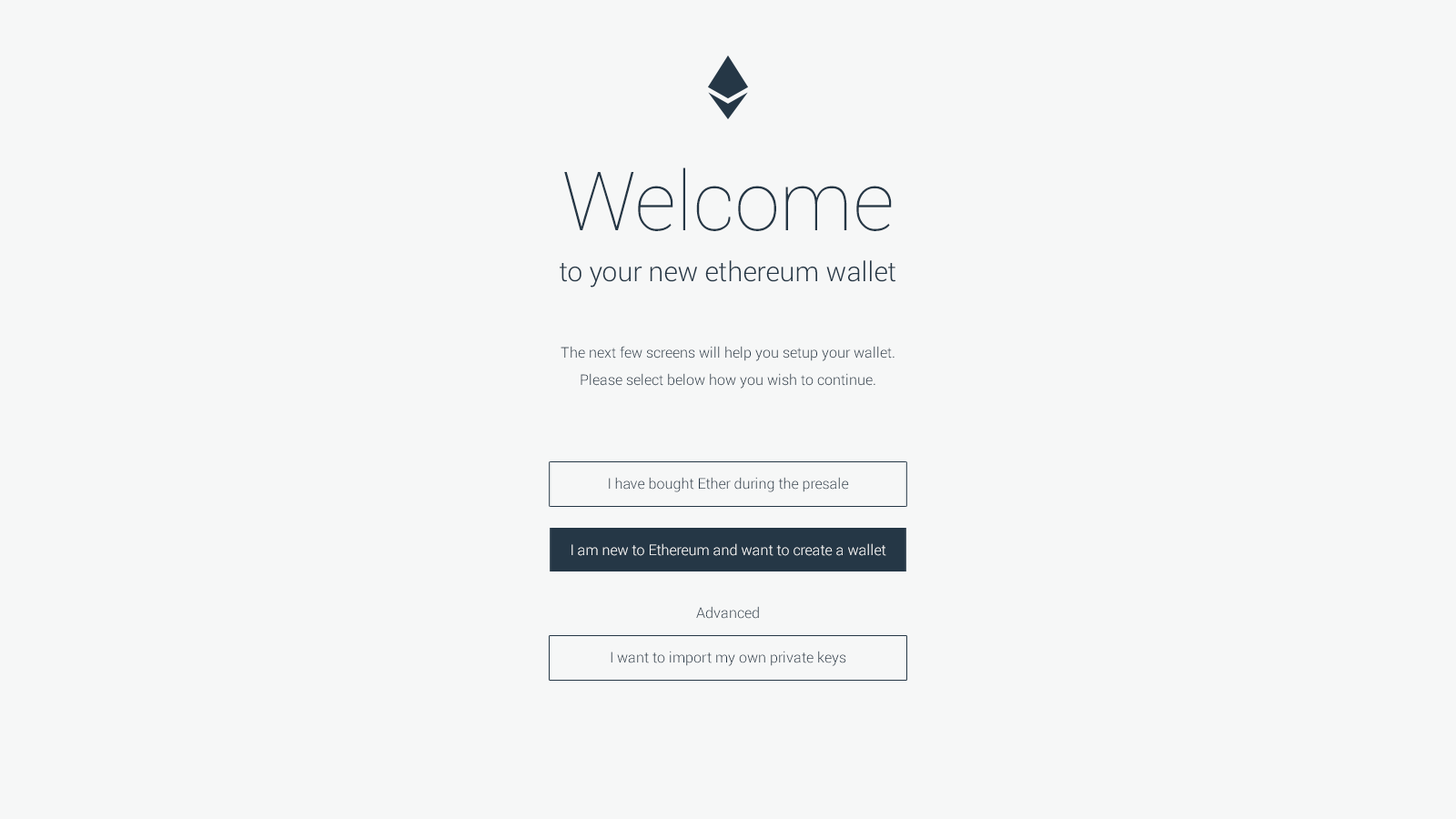
<style>
.page{position:relative;width:1456px;height:819px;background:#f6f7f7}
.page>*{position:absolute;margin:0}
.t1{font:81.9px "Roboto-Thin";color:#253746}
.t2{font:27.3px "Roboto-Light";color:#253746}
.t3{font:14.6px/27.3px "Roboto-Light";color:#253746}
.t4{font:14.6px "Roboto-Light";color:#253746}
.t5{font:14.6px "Roboto-Light";color:#ffffff}
</style>
<div class="page">
<p class="t1" style="left:564px;top:167px;width:328px;height:64px">Welcome</p>
<p class="t2" style="left:560px;top:260px;width:335px;height:28px">to your new ethereum wallet</p>
<p class="t3" style="left:561px;top:346px;width:334px;height:43px;text-align:center">The next few screens will help you setup your wallet.<br>Please select below how you wish to continue.</p>
<p class="t4" style="left:609px;top:477px;width:240px;height:15px">I have bought Ether during the presale</p>
<p class="t5" style="left:571px;top:543px;width:315px;height:13px">I am new to Ethereum and want to create a wallet</p>
<p class="t4" style="left:696px;top:606px;width:63px;height:13px">Advanced</p>
<p class="t4" style="left:611px;top:651px;width:235px;height:15px">I want to import my own private keys</p>
</div>
